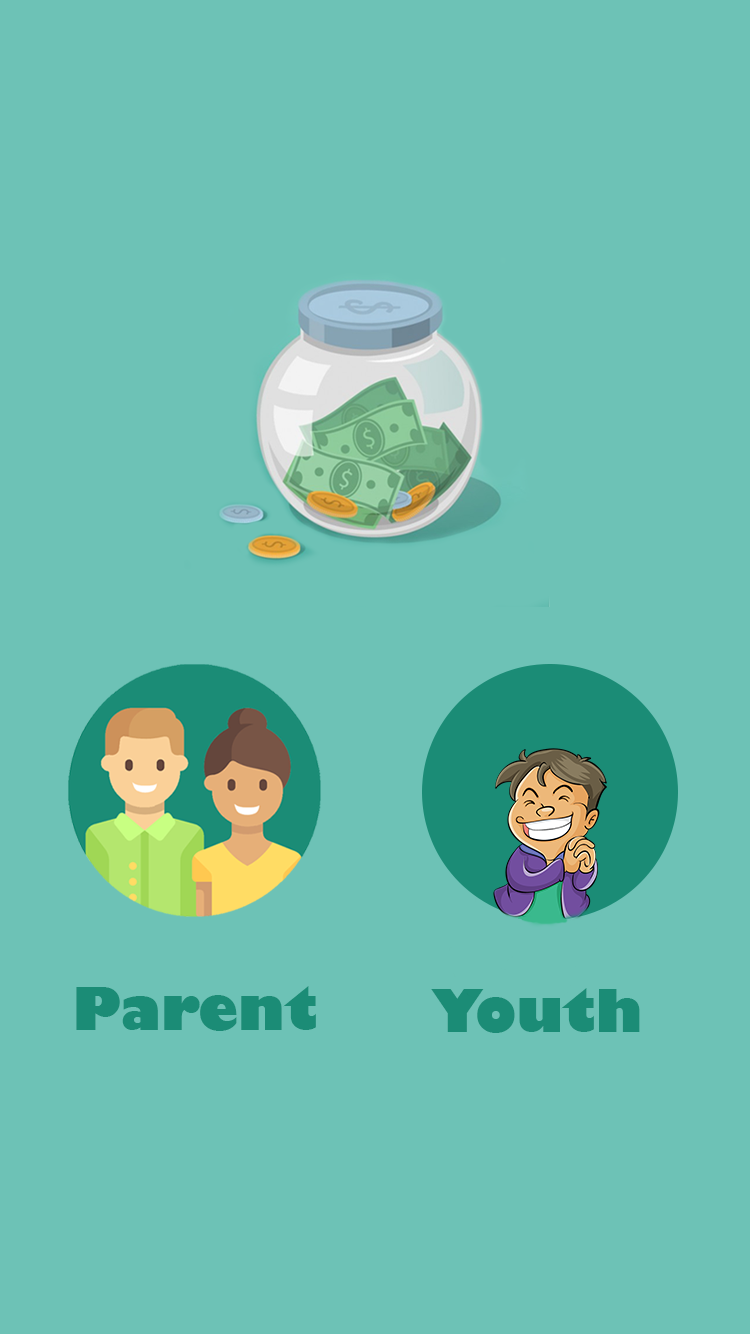
<style>
.page{position:relative;width:750px;height:1334px;background:#6dc2b6}
.page>*{position:absolute;margin:0}
.t1{font:58px "GillSans-UltraBold";color:#1b8c76}
</style>
<div class="page">
<p class="t1" style="left:76px;top:986px;width:240px;height:45px">Parent</p>
<p class="t1" style="left:431px;top:988px;width:209px;height:45px">Youth</p>
</div>
